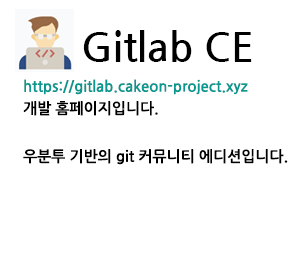
<style>
.page{position:relative;width:300px;height:280px;background:#ffffff}
.page>*{position:absolute;margin:0}
.t1{font:40px "NanumGothicBold";color:#000000}
.t2{font:15px "NanumGothicBold";color:#0a978f}
.t3{font:15px "NanumGothicBold";color:#000000}
</style>
<div class="page">
<p class="t1" style="left:83px;top:30px;width:169px;height:32px">Gitlab CE</p>
<p class="t2" style="left:24px;top:79px;width:224px;height:16px">https://gitlab.cakeon-project.xyz</p>
<p class="t3" style="left:23px;top:101px;width:135px;height:15px">개발 홈페이지입니다.</p>
<p class="t3" style="left:23px;top:149px;width:265px;height:16px">우분투 기반의 git 커뮤니티 에디션입니다.</p>
</div>
